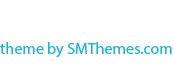
<style>
.page{position:relative;width:173px;height:65px;background:#ffffff}
.page>*{position:absolute;margin:0}
.t1{font:15.7px "MyriadPro-Regular";color:#23b0d7}
</style>
<div class="page">
<p class="t1" style="left:0px;top:42px;width:172px;height:16px">theme by SMThemes.com</p>
</div>
